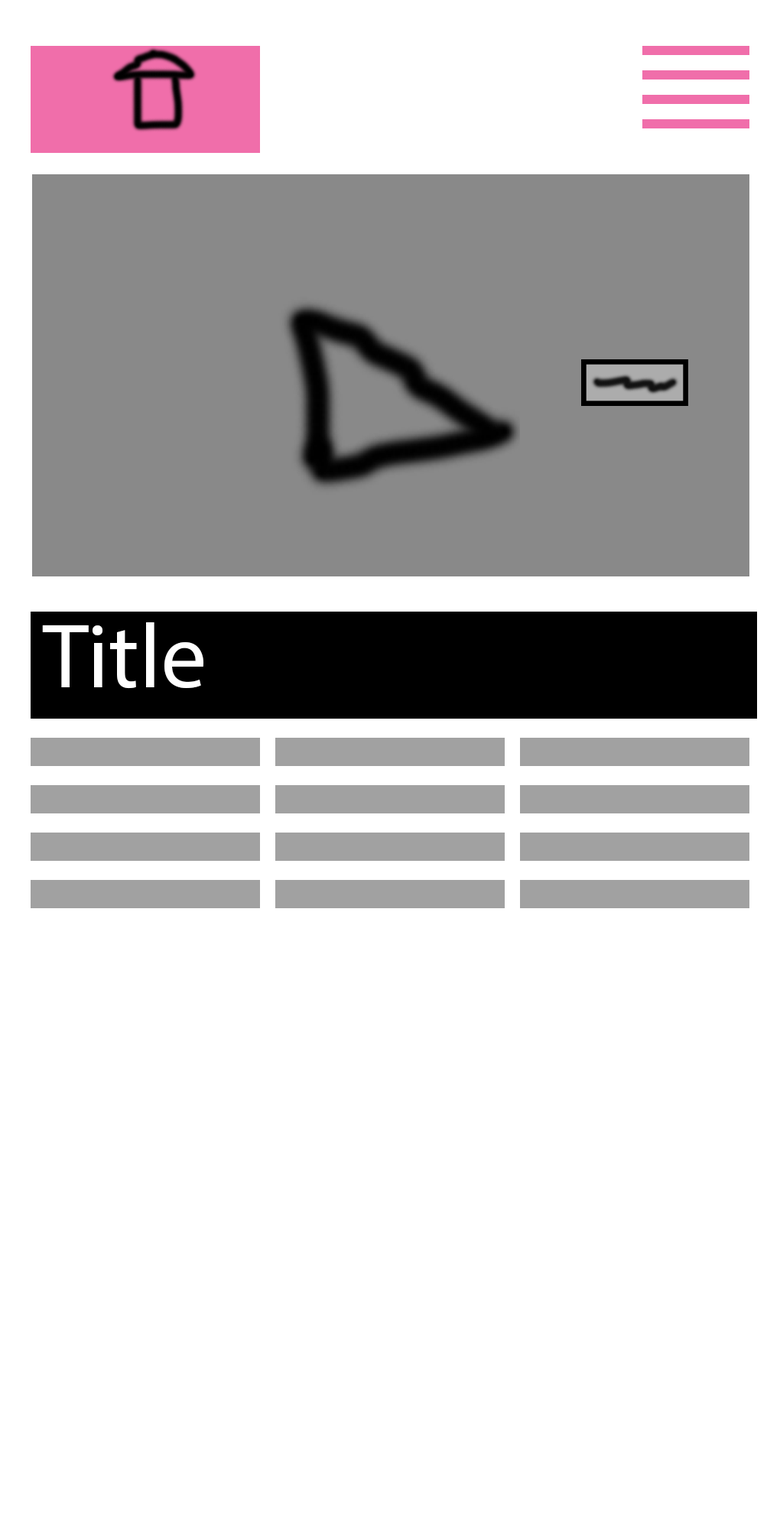
<style>
.page{position:relative;width:780px;height:1529px;background:#ffffff}
.page>*{position:absolute;margin:0}
.t1{font:91.7px "MyriadPro-Regular";color:#ffffff}
</style>
<div class="page">
<p class="t1" style="left:42px;top:622px;width:161px;height:67px">Title</p>
</div>
